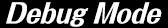
<style>
.page{position:relative;width:168px;height:28px;background:#000000}
.page>*{position:absolute;margin:0}
.t1{font:27.5px "FolkPro-Heavy";color:#ffffff;scale:0.87 1}
</style>
<div class="page">
<p class="t1" style="left:6px;top:2px;width:156px;height:25px">Debug Mode</p>
</div>
